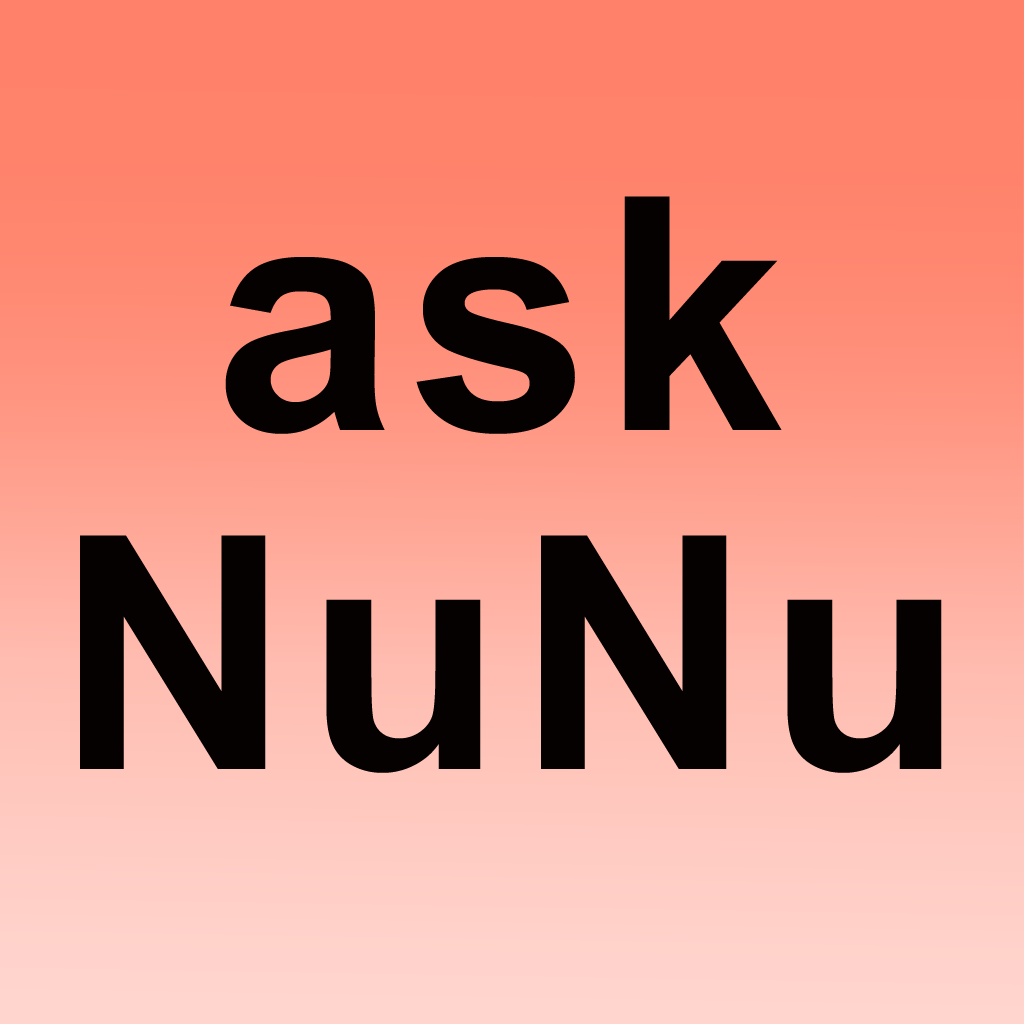
<style>
.page{position:relative;width:1024px;height:1024px}
.page>*{position:absolute;margin:0}
.t1{font:326.3px "Arial-BoldMT";letter-spacing:0.04em;color:#040100}
</style>
<div class="page">
<p class="t1" style="left:225px;top:196px;width:557px;height:238px">ask</p>
<p class="t1" style="left:80px;top:535px;width:862px;height:238px">NuNu</p>
</div>
